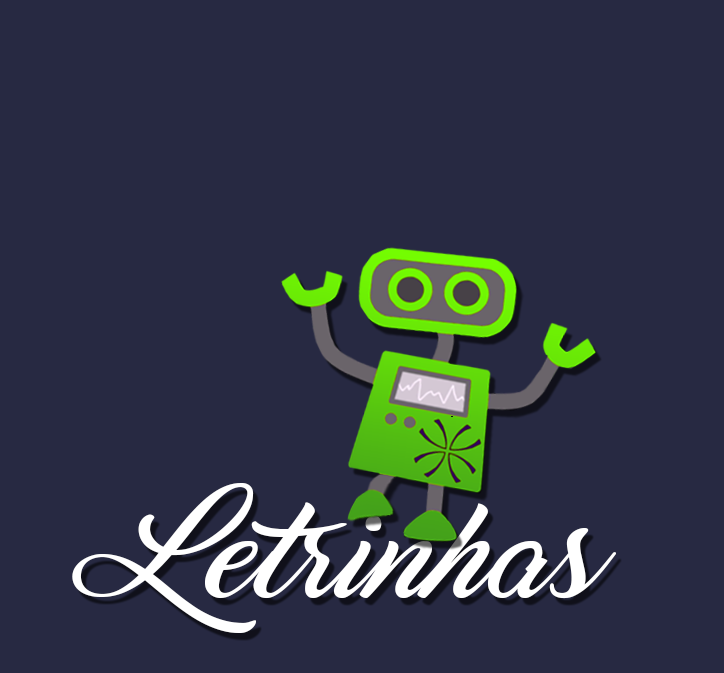
<style>
.page{position:relative;width:724px;height:673px;background:#272942}
.page>*{position:absolute;margin:0}
.t1{font:96px "Marguerite";color:#ffffff;scale:1.1 1}
</style>
<div class="page">
<p class="t1" style="left:72px;top:483px;width:544px;height:150px">Letrinhas</p>
</div>
